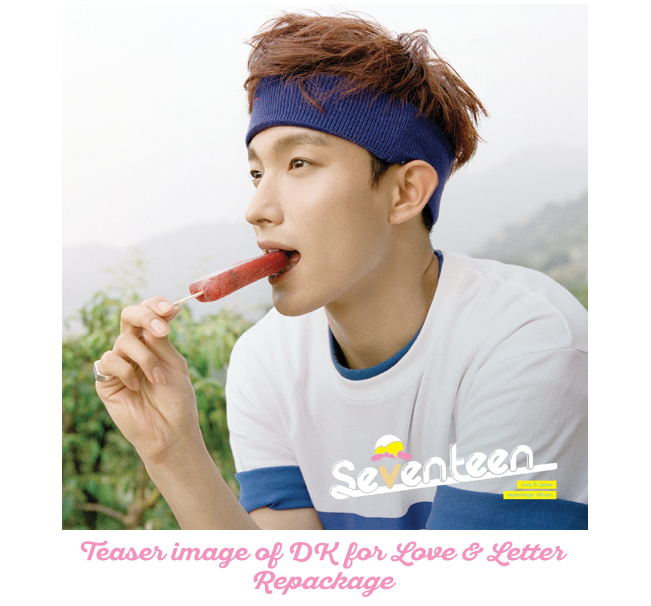
<style>
.page{position:relative;width:651px;height:606px;background:#ffffff}
.page>*{position:absolute;margin:0}
.t1{font:24px "SantEliaScript-BoldDMO";color:#f394c0;font-style:italic;scale:1.1 1}
.t2{font:24px "SantEliaScript-BoldDMO";color:#f394c0;scale:1.1 1}
</style>
<div class="page">
<p class="t1" style="left:80px;top:540px;width:488px;height:57px;text-align:center"><span class="t2">Teaser image of DK for </span>Love &amp; Letter<br>Repackage</p>
</div>
